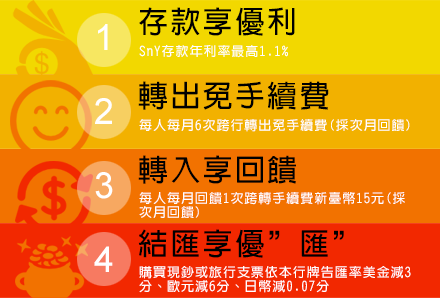
<style>
.page{position:relative;width:440px;height:298px;background:#f2b100}
.page>*{position:absolute;margin:0}
.t1{font:30px/74px "NewGothic-Bold";letter-spacing:0.075em;color:#000000}
.t2{font:36px/74px "ArialMT";letter-spacing:0.075em;color:#ffffff}
.t3{font:13px/74px "NewGothic-Bold";letter-spacing:0.075em;color:#ffffff}
.t4{font:13px/14px "NewGothic-Bold";letter-spacing:0.075em;color:#ffffff}
</style>
<div class="page">
<p class="t1" style="left:138px;top:7px;width:206px;height:251px;text-align:justify">存款享優利<br>轉出免手續費<br>轉入享回饋<br>結匯享優”匯”</p>
<p class="t2" style="left:94px;top:24px;width:19px;height:248px;text-align:justify">1<br>2<br>3<br>4</p>
<p class="t3" style="left:139px;top:45px;width:271px;height:87px;text-align:justify">SnY存款年利率最高1.1%<br>每人每月6次跨行轉出免手續費(採次月回饋)</p>
<p class="t4" style="left:139px;top:192px;width:266px;height:26px;text-align:justify">每人每月回饋1次跨轉手續費新臺幣15元(採<br>次月回饋)</p>
<p class="t4" style="left:139px;top:265px;width:272px;height:28px;text-align:justify">購買現鈔或旅行支票依本行牌告匯率美金減3<br>分、歐元減6分、日幣減0.07分</p>
</div>
